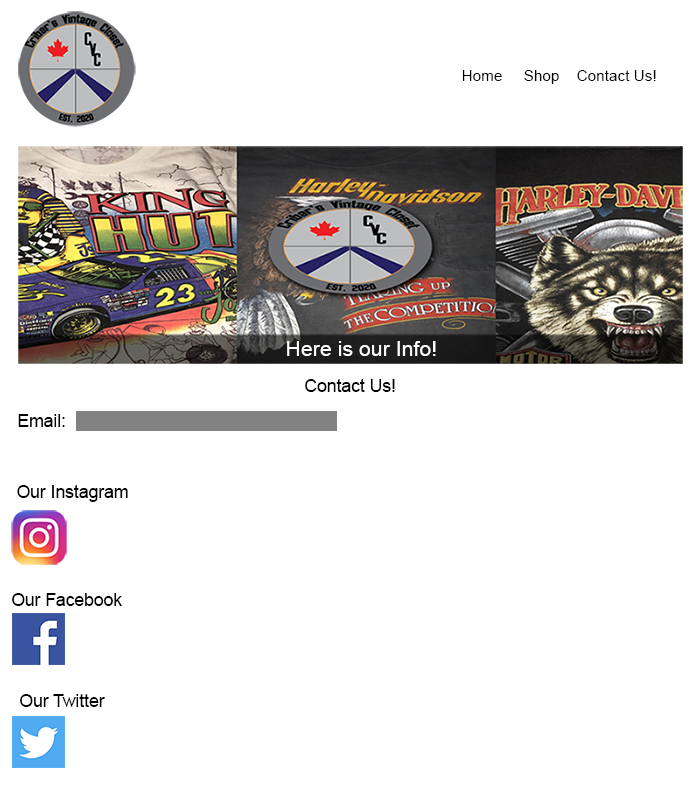
<style>
.page{position:relative;width:700px;height:797px;background:#ffffff}
.page>*{position:absolute;margin:0}
.t1{font:15.3px "ArialMT";color:#000000}
.t2{font:21.3px "ArialMT";color:#ffffff}
.t3{font:17.5px "ArialMT";color:#000000}
</style>
<div class="page">
<p class="t1" style="left:462px;top:70px;width:194px;height:14px">Home     Shop    Contact Us!</p>
<p class="t2" style="left:287px;top:341px;width:149px;height:15px">Here is our Info!</p>
<p class="t3" style="left:305px;top:379px;width:90px;height:13px">Contact Us!</p>
<p class="t3" style="left:18px;top:414px;width:47px;height:13px">Email:</p>
<p class="t3" style="left:17px;top:485px;width:111px;height:17px">Our Instagram</p>
<p class="t3" style="left:12px;top:593px;width:110px;height:13px">Our Facebook</p>
<p class="t3" style="left:20px;top:694px;width:85px;height:13px">Our Twitter</p>
</div>
